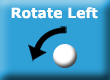
<style>
.page{position:relative;width:110px;height:80px;background:#2fa1d7}
.page>*{position:absolute;margin:0}
.t1{font:14px "Verdana-Bold";color:#ffffff}
</style>
<div class="page">
<p class="t1" style="left:11px;top:7px;width:87px;height:12px">Rotate Left</p>
</div>
